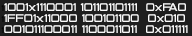
<style>
.page{position:relative;width:192px;height:36px;background:#1e1e1e}
.page>*{position:absolute;margin:0}
.t1{font:10.7px "Probert-Bold";color:#f8f8f8}
.t2{font:8px "Probert-Bold";color:#000000}
</style>
<div class="page">
<p class="t1" style="left:1px;top:3px;width:185px;height:8px"><span class="t2">1</span>1001x1110001 101101101111  0xFA0</p>
<p class="t1" style="left:1px;top:14px;width:184px;height:8px"><span class="t2">1</span>1FF01x11000 100101100  0x010</p>
<p class="t1" style="left:1px;top:25px;width:187px;height:8px"><span class="t2">1</span>001011100011 1100011011  0x011111</p>
</div>
